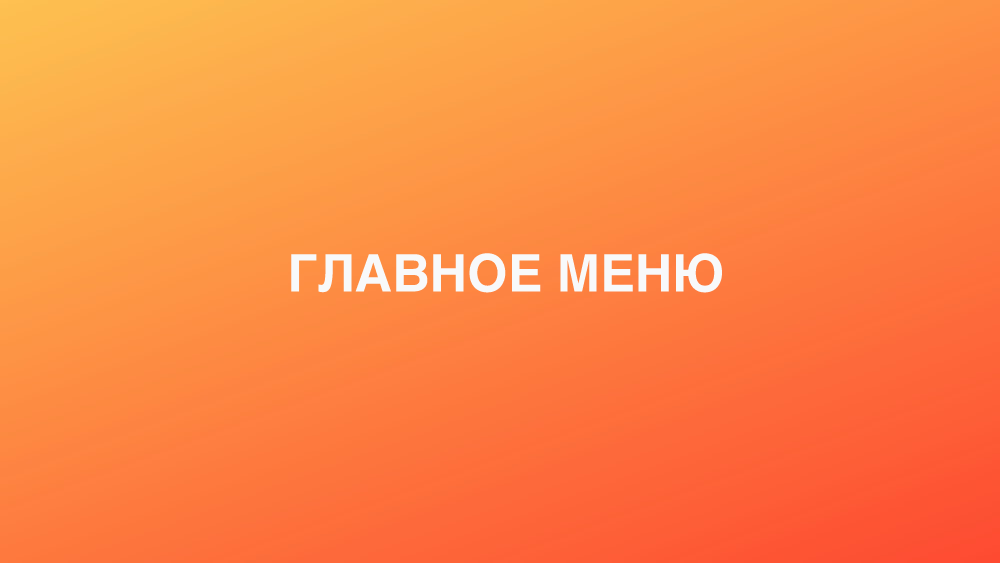
<style>
.page{position:relative;width:1000px;height:563px}
.page>*{position:absolute;margin:0}
.t1{font:52px "Helvetica-Bold";color:#f8f9fa}
</style>
<div class="page">
<p class="t1" style="left:291px;top:253px;width:432px;height:40px">ГЛАВНОЕ МЕНЮ</p>
</div>
